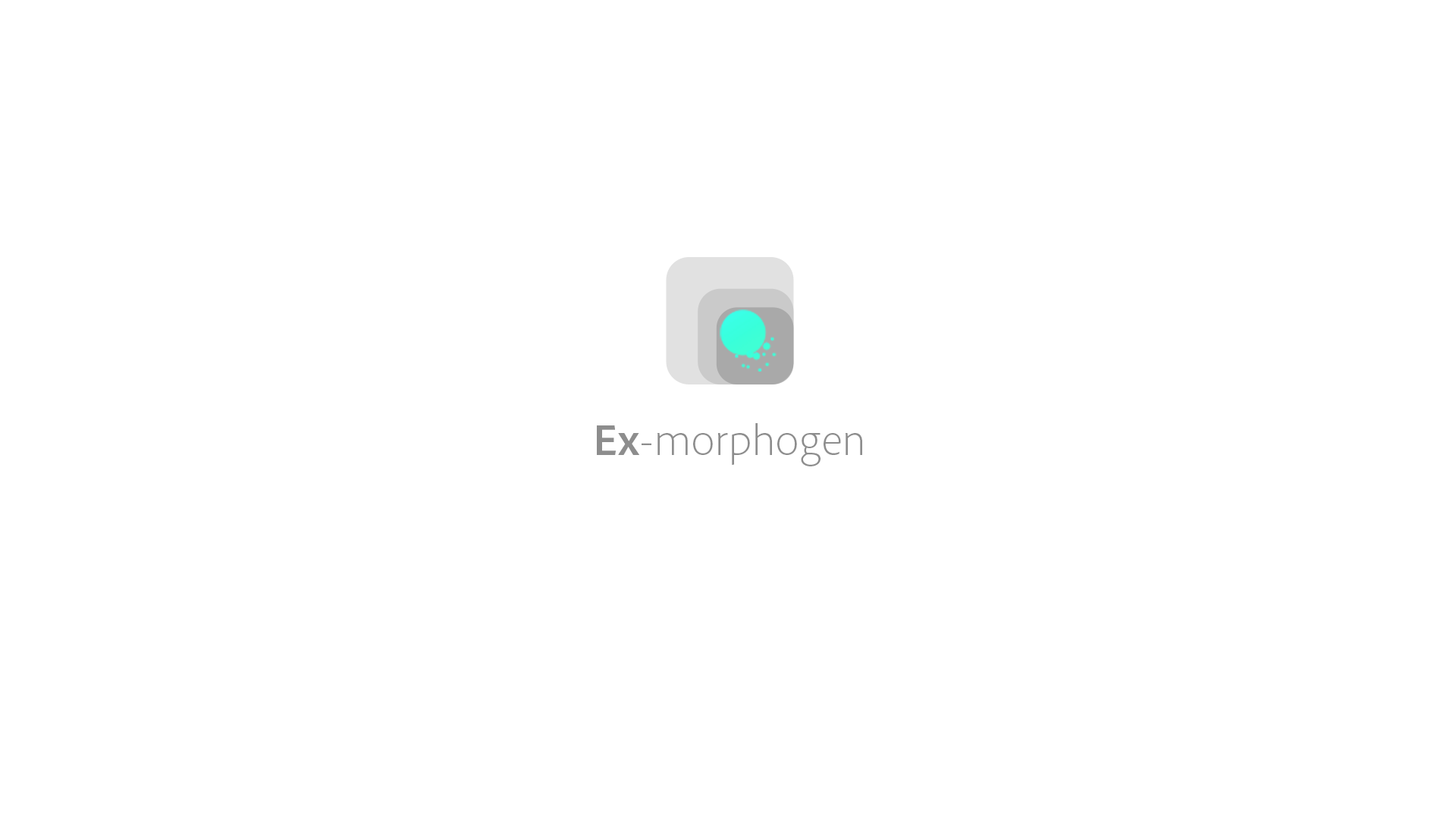
<style>
.page{position:relative;width:1456px;height:819px;background:#ffffff}
.page>*{position:absolute;margin:0}
.t1{font:44.5px "AdobeClean-Light";color:#8d8d8d}
.t2{font:44.5px "AdobeClean-Bold";color:#8d8d8d}
</style>
<div class="page">
<p class="t1" style="left:597px;top:423px;width:265px;height:43px"><span class="t2">Ex</span>-morphogen</p>
</div>
